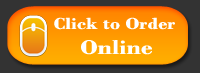
<style>
.page{position:relative;width:200px;height:73px;background:#333333}
.page>*{position:absolute;margin:0}
.t1{font:16.7px "BodoniMT-Bold";color:#ffffff;scale:1.28 1}
.t2{font:20.9px "BodoniMT-Bold";color:#ffffff;scale:1.28 1}
</style>
<div class="page">
<p class="t1" style="left:54px;top:17px;width:121px;height:38px">Click to Order<br><span class="t2">Online</span></p>
</div>
